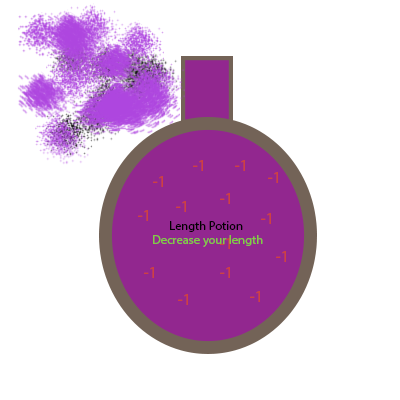
<style>
.page{position:relative;width:400px;height:400px;background:#ffffff}
.page>*{position:absolute;margin:0}
.t1{font:16.7px "MyriadPro-Regular";color:#ce4141}
.t2{font:12.5px "MyriadPro-Regular";color:#010101}
.t3{font:12.5px "MyriadPro-Regular";color:#80ce41}
</style>
<div class="page">
<p class="t1" style="left:193px;top:160px;width:10px;height:11px">-1</p>
<p class="t1" style="left:235px;top:160px;width:10px;height:11px">-1</p>
<p class="t1" style="left:268px;top:172px;width:10px;height:11px">-1</p>
<p class="t1" style="left:153px;top:176px;width:10px;height:11px">-1</p>
<p class="t1" style="left:220px;top:193px;width:10px;height:11px">-1</p>
<p class="t1" style="left:176px;top:201px;width:10px;height:11px">-1</p>
<p class="t1" style="left:138px;top:210px;width:10px;height:11px">-1</p>
<p class="t2" style="left:170px;top:221px;width:73px;height:11px">Length Potion</p>
<p class="t1" style="left:261px;top:213px;width:10px;height:11px">-1</p>
<p class="t3" style="left:153px;top:235px;width:110px;height:12px">Decrease your length</p>
<p class="t1" style="left:220px;top:238px;width:10px;height:11px">-1</p>
<p class="t1" style="left:276px;top:251px;width:10px;height:11px">-1</p>
<p class="t1" style="left:144px;top:267px;width:10px;height:11px">-1</p>
<p class="t1" style="left:220px;top:267px;width:10px;height:11px">-1</p>
<p class="t1" style="left:178px;top:294px;width:10px;height:11px">-1</p>
<p class="t1" style="left:250px;top:291px;width:10px;height:11px">-1</p>
</div>
